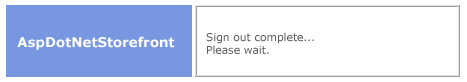
<style>
.page{position:relative;width:467px;height:82px;background:#ffffff}
.page>*{position:absolute;margin:0}
.t1{font:13.3px "Verdana-Bold";color:#ffffff}
.t2{font:10.7px "Verdana";color:#5c5c5c}
</style>
<div class="page">
<p class="t1" style="left:17px;top:36px;width:158px;height:14px">AspDotNetStorefront</p>
<p class="t2" style="left:206px;top:32px;width:108px;height:22px">Sign out complete...<br>Please wait.</p>
</div>
